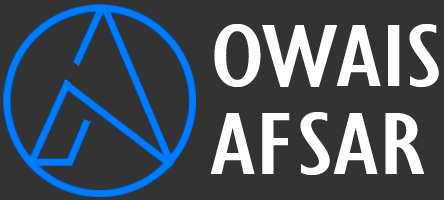
<style>
.page{position:relative;width:444px;height:200px;background:#333333}
.page>*{position:absolute;margin:0}
.t1{font:91.7px "GillSansMT-Condensed";color:#ffffff;scale:1.4 1}
.t2{font:91.7px "GillSansMT-Condensed";color:#fffefe;scale:1.4 1}
</style>
<div class="page">
<p class="t1" style="left:214px;top:24px;width:225px;height:64px">OWAIS</p>
<p class="t2" style="left:210px;top:112px;width:215px;height:64px">AFSAR</p>
</div>
